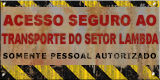
<style>
.page{position:relative;width:160px;height:80px}
.page>*{position:absolute;margin:0}
.t1{font:14.5px/18.7px "Arial-Black";color:#941210;text-transform:uppercase;scale:0.58 1}
.t2{font:14.5px/18.7px "Arial-Black";color:#941210;text-transform:uppercase;scale:0.92 1}
.t3{font:7.4px "Tahoma-Bold";letter-spacing:0.12em;font-weight:bold}
</style>
<div class="page">
<p class="t1" style="left:1px;top:14px;width:158px;height:31px;text-align:center"><span class="t2">Acesso seguro ao<br></span>transporte do setor lambda</p>
<p class="t3" style="left:3px;top:53px;width:153px;height:6px">SOMENTE PESSOAL AUTORIZADO</p>
</div>
